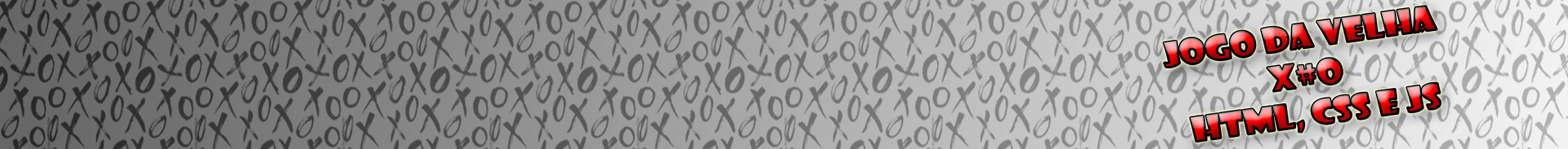
<style>
.page{position:relative;width:1568px;height:149px}
.page>*{position:absolute;margin:0}
.t1{font:32.6px "ShowcardGothic-Reg";scale:1.14 1}
</style>
<div class="page">
<p class="t1" style="left:1164px;top:6px;width:277px;height:136px;text-align:center;rotate:-8deg">JOGO DA VELHA <br>x#o <br>HTML, CSS E JS</p>
</div>
